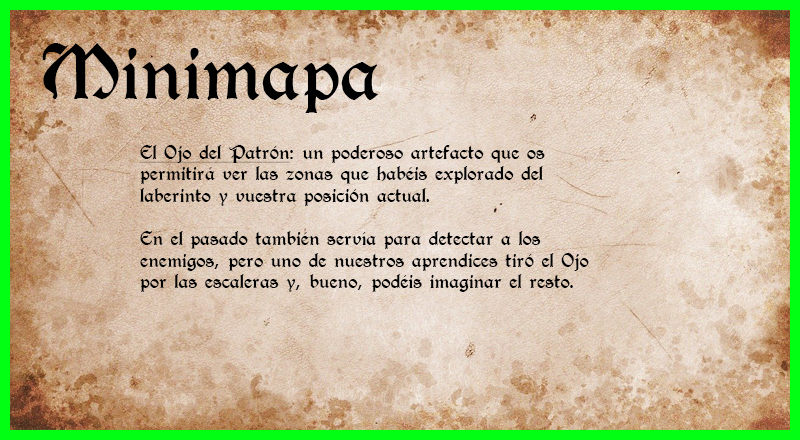
<style>
.page{position:relative;width:800px;height:440px}
.page>*{position:absolute;margin:0}
.t1{font:72px "T4C-Beaulieux";color:#000000}
.t2{font:18px "T4C-Beaulieux";color:#000000}
.t3{font:18px "T4C-Beaulieux";color:#000000;text-decoration:underline}
</style>
<div class="page">
<p class="t1" style="left:42px;top:43px;width:337px;height:70px">Minimapa</p>
<p class="t2" style="left:140px;top:145px;width:449px;height:147px"><span class="t3">El Ojo del Patrón</span>: un poderoso artefacto que os permitirá ver las zonas que habéis explorado del laberinto y vuestra posición actual. <br><br>En el pasado también servía para detectar a los enemigos, pero uno de nuestros aprendices tiró el Ojo por las escaleras y, bueno, podéis imaginar el resto.</p>
</div>
